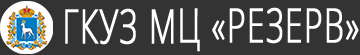
<style>
.page{position:relative;width:360px;height:55px;background:#333333}
.page>*{position:absolute;margin:0}
.t1{font:47.2px "OpenSans-Light";letter-spacing:0.025em;color:#ffffff;font-weight:bold;scale:0.67 1}
</style>
<div class="page">
<p class="t1" style="left:65px;top:7px;width:294px;height:45px">ГКУЗ МЦ «РЕЗЕРВ»</p>
</div>
